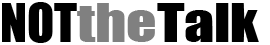
<style>
.page{position:relative;width:270px;height:45px;background:#ffffff}
.page>*{position:absolute;margin:0}
.t1{font:49.2px "Impact";color:#000000;scale:1.21 1}
.t2{font:49.2px "Impact";color:#000000}
.t3{font:49.2px "Impact";color:#808080;scale:1.21 1}
</style>
<div class="page">
<p class="t1" style="left:2px;top:2px;width:257px;height:41px"><span class="t2">NOT</span><span class="t3">the</span>Talk</p>
</div>
